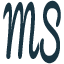
<style>
.page{position:relative;width:64px;height:64px;background:#ffffff}
.page>*{position:absolute;margin:0}
.t1{font:67.8px "Pacifico-Regular";color:#193441;scale:0.45 1}
</style>
<div class="page">
<p class="t1" style="left:3px;top:0px;width:58px;height:64px">MS</p>
</div>
